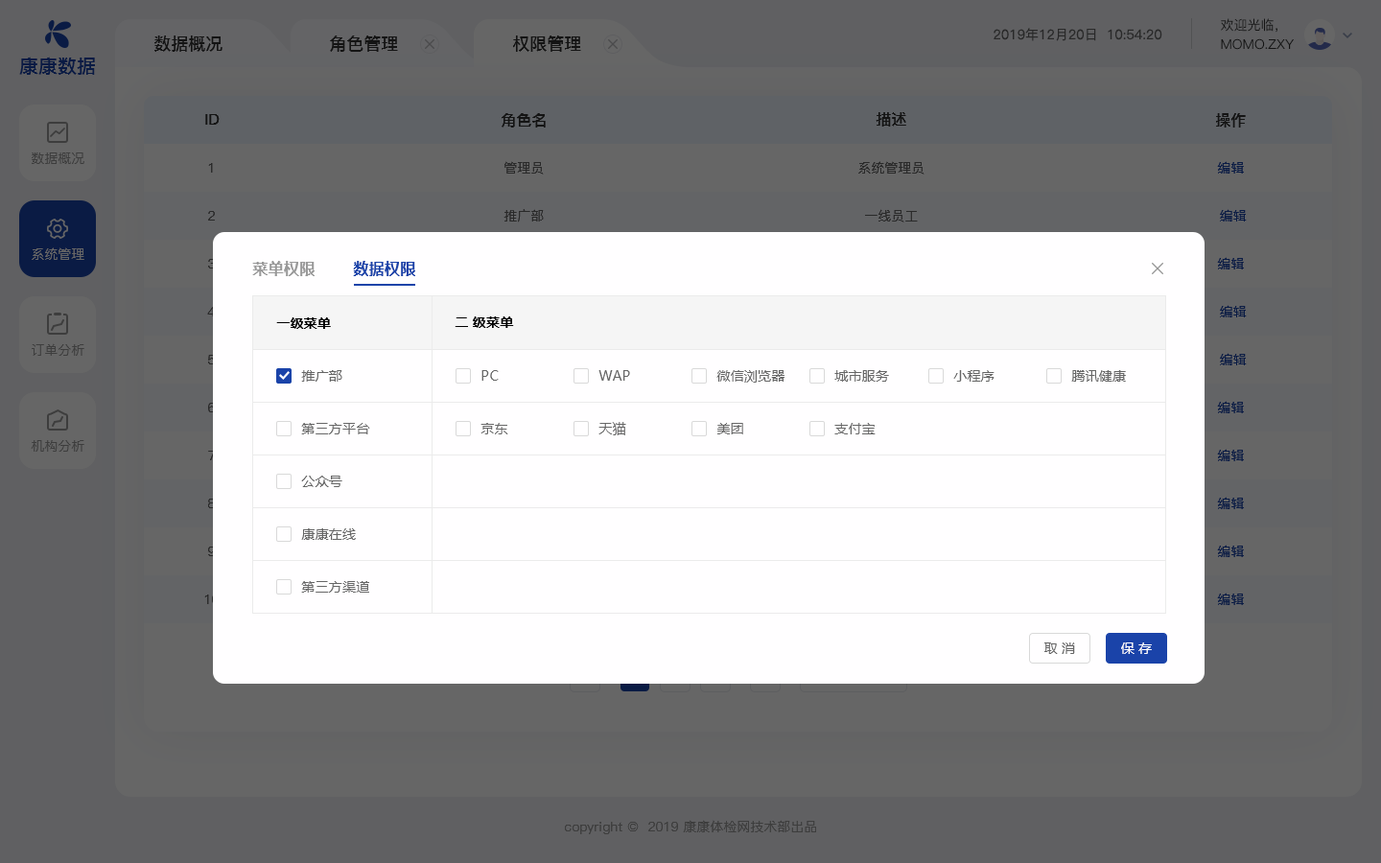
<style>
.page{position:relative;width:1381px;height:863px;background:#fffeff}
.page>*{position:absolute;margin:0}
.t1{font:13.4px "PingFang-SC-Regular";color:#292929}
.t2{font:13.4px "PingFang-SC-Medium";color:#141414;text-transform:uppercase}
.t3{font:17.3px "PingFang-SC-Bold";color:#141414;text-transform:uppercase}
.t4{font:19.2px "PingFangSC-Medium";color:#0a1b44;text-transform:uppercase}
.t5{font:15.3px "PingFang-SC-Bold";color:#141414;text-transform:uppercase}
.t6{font:13.4px "PingFang-SC-Medium";color:#3d3d3d;text-transform:uppercase}
.t7{font:13.4px "PingFang-SC-Medium";color:#292929;text-transform:uppercase}
.t8{font:13.4px "PingFang-SC-Medium";color:#0a1b44;text-transform:uppercase}
.t9{font:13.4px "PingFang-SC-Medium";color:#666666;text-transform:uppercase}
.t10{font:15.3px "MicrosoftYaHei-Bold";letter-spacing:0.02em;color:#999999}
.t11{font:15.3px "MicrosoftYaHei-Bold";letter-spacing:0.02em;color:#1a43a9}
.t12{font:13.4px "MicrosoftYaHei-Bold";letter-spacing:0.02em;color:#000000}
.t13{font:13.4px "MicrosoftYaHei";letter-spacing:0.02em;color:#666666}
.t14{font:13.4px "MicrosoftYaHei";letter-spacing:0.02em;color:#ffffff}
.t15{font:13.4px "PingFang-SC-Medium";color:#3d3d3d}
</style>
<div class="page">
<p class="t1" style="left:994px;top:28px;width:169px;height:13px">2019年12月20日  10:54:20</p>
<p class="t2" style="left:1221px;top:18px;width:57px;height:15px">欢迎光临，</p>
<p class="t3" style="left:154px;top:35px;width:69px;height:17px">数据概况</p>
<p class="t3" style="left:330px;top:35px;width:68px;height:17px">角色管理</p>
<p class="t3" style="left:513px;top:35px;width:68px;height:17px">权限管理</p>
<p class="t2" style="left:1221px;top:38px;width:73px;height:12px">momo.zxy</p>
<p class="t4" style="left:19px;top:57px;width:76px;height:18px">康康数据</p>
<p class="t5" style="left:502px;top:113px;width:44px;height:15px">角色名</p>
<p class="t5" style="left:876px;top:112px;width:30px;height:15px">描述</p>
<p class="t5" style="left:1216px;top:113px;width:30px;height:15px">操作</p>
<p class="t5" style="left:205px;top:114px;width:15px;height:11px">ID</p>
<p class="t6" style="left:32px;top:153px;width:52px;height:11px">数据概况</p>
<p class="t7" style="left:505px;top:161px;width:39px;height:14px">管理员</p>
<p class="t7" style="left:858px;top:161px;width:67px;height:14px">系统管理员</p>
<p class="t8" style="left:1217px;top:161px;width:27px;height:13px">编辑</p>
<p class="t7" style="left:208px;top:163px;width:5px;height:10px">1</p>
<p class="t7" style="left:504px;top:209px;width:40px;height:14px">推广部</p>
<p class="t7" style="left:865px;top:209px;width:53px;height:14px">一线员工</p>
<p class="t8" style="left:1220px;top:209px;width:27px;height:13px">编辑</p>
<p class="t7" style="left:208px;top:211px;width:7px;height:10px">2</p>
<p class="t9" style="left:32px;top:247px;width:52px;height:13px">系统管理</p>
<p class="t8" style="left:1217px;top:257px;width:27px;height:13px">编辑</p>
<p class="t10" style="left:252px;top:261px;width:63px;height:15px">菜单权限</p>
<p class="t11" style="left:353px;top:261px;width:62px;height:15px">数据权限</p>
<p class="t8" style="left:1220px;top:305px;width:27px;height:12px">编辑</p>
<p class="t12" style="left:276px;top:317px;width:55px;height:12px">一级菜单</p>
<p class="t12" style="left:455px;top:317px;width:59px;height:11px">二 级菜单</p>
<p class="t6" style="left:32px;top:343px;width:52px;height:13px">订单分析</p>
<p class="t8" style="left:1220px;top:353px;width:27px;height:12px">编辑</p>
<p class="t13" style="left:301px;top:370px;width:41px;height:12px">推广部</p>
<p class="t13" style="left:482px;top:370px;width:17px;height:11px">PC</p>
<p class="t13" style="left:599px;top:370px;width:31px;height:11px">WAP</p>
<p class="t13" style="left:717px;top:370px;width:68px;height:13px">微信浏览器</p>
<p class="t13" style="left:835px;top:370px;width:54px;height:12px">城市服务</p>
<p class="t13" style="left:953px;top:370px;width:42px;height:12px">小程序</p>
<p class="t13" style="left:1071px;top:370px;width:55px;height:12px">腾讯健康</p>
<p class="t8" style="left:1217px;top:401px;width:27px;height:12px">编辑</p>
<p class="t13" style="left:301px;top:423px;width:69px;height:12px">第三方平台</p>
<p class="t13" style="left:481px;top:423px;width:27px;height:12px">京东</p>
<p class="t13" style="left:599px;top:422px;width:27px;height:13px">天猫</p>
<p class="t13" style="left:717px;top:423px;width:26px;height:12px">美团</p>
<p class="t13" style="left:835px;top:423px;width:41px;height:12px">支付宝</p>
<p class="t6" style="left:31px;top:440px;width:53px;height:12px">机构分析</p>
<p class="t8" style="left:1217px;top:449px;width:27px;height:12px">编辑</p>
<p class="t13" style="left:301px;top:476px;width:41px;height:11px">公众号</p>
<p class="t8" style="left:1217px;top:497px;width:27px;height:12px">编辑</p>
<p class="t13" style="left:301px;top:529px;width:55px;height:11px">康康在线</p>
<p class="t8" style="left:1217px;top:545px;width:27px;height:12px">编辑</p>
<p class="t13" style="left:301px;top:581px;width:68px;height:12px">第三方渠道</p>
<p class="t8" style="left:1217px;top:593px;width:27px;height:12px">编辑</p>
<p class="t13" style="left:1045px;top:643px;width:30px;height:11px">取 消</p>
<p class="t14" style="left:1121px;top:643px;width:31px;height:11px">保 存</p>
<p class="t15" style="left:565px;top:820px;width:251px;height:15px">copyright ©  2019 康康体检网技术部出品</p>
</div>
